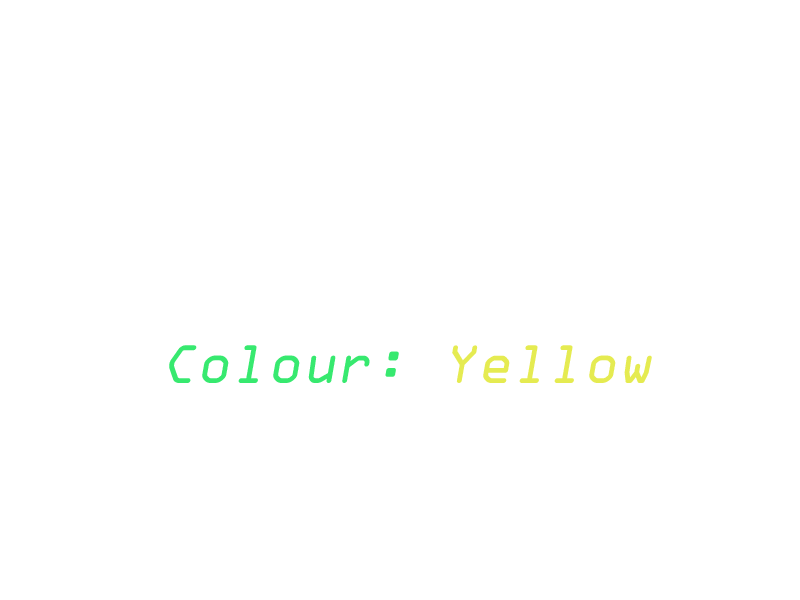
<style>
.page{position:relative;width:800px;height:600px;background:#ffffff}
.page>*{position:absolute;margin:0}
.t1{font:58.1px "OCRAExtended";color:#37e96f;font-style:italic}
.t2{font:58.1px "OCRAExtended";color:#e5eb51;font-style:italic}
</style>
<div class="page">
<p class="t1" style="left:169px;top:345px;width:483px;height:38px">Colour: <span class="t2">Yellow</span></p>
</div>
